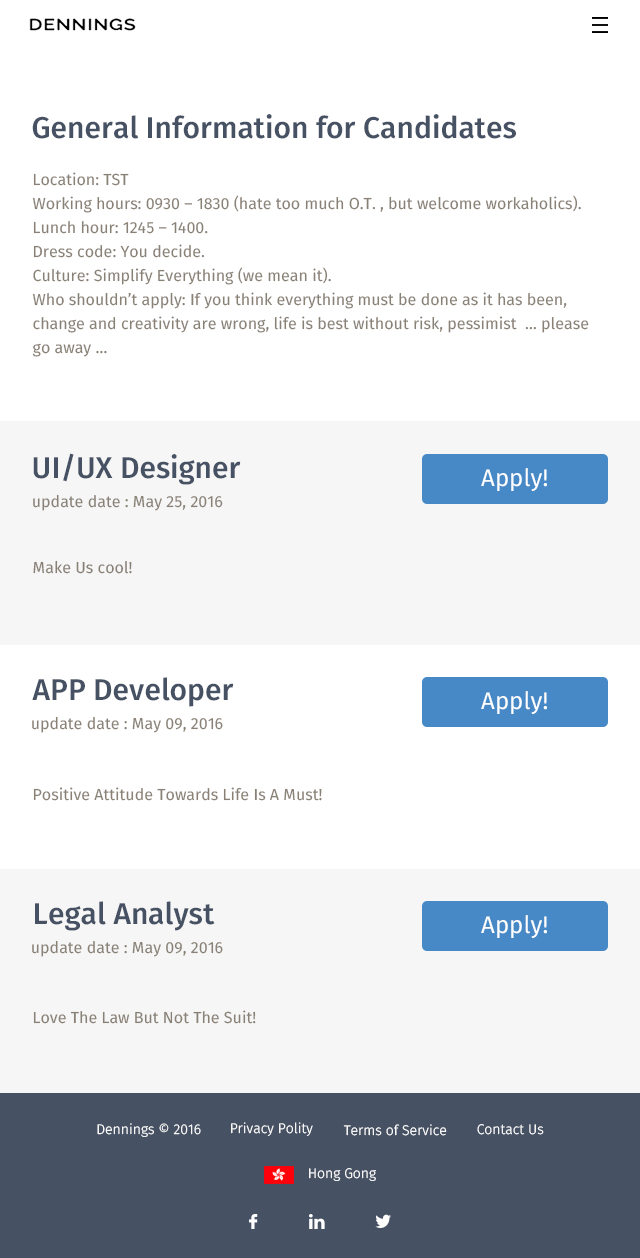
<style>
.page{position:relative;width:640px;height:1258px;background:#ffffff}
.page>*{position:absolute;margin:0}
.t1{font:30px "FiraSans-Medium";color:#465163}
.t2{font:16px/24px "FiraSans-Regular";color:#898176}
.t3{font:24px "FiraSans-Regular";color:#ffffff}
.t4{font:16px "FiraSans-Regular";color:#898176}
.t5{font:14px "FiraSans-Light";color:#ffffff}
</style>
<div class="page">
<p class="t1" style="left:32px;top:114px;width:484px;height:25px">General Information for Candidates</p>
<p class="t2" style="left:32px;top:172px;width:557px;height:185px">Location: TST<br>Working hours: 0930 – 1830 (hate too much O.T. , but welcome workaholics).<br>Lunch hour: 1245 – 1400.<br>Dress code: You decide.<br>Culture: Simplify Everything (we mean it).<br>Who shouldn’t apply: If you think everything must be done as it has been, change and creativity are wrong, life is best without risk, pessimist  … please go away …</p>
<p class="t1" style="left:33px;top:453px;width:208px;height:32px">UI/UX Designer</p>
<p class="t3" style="left:481px;top:468px;width:66px;height:23px">Apply!</p>
<p class="t4" style="left:33px;top:494px;width:190px;height:17px">update date : May 25, 2016</p>
<p class="t4" style="left:33px;top:560px;width:99px;height:14px">Make Us cool!</p>
<p class="t1" style="left:32px;top:677px;width:202px;height:30px">APP Developer</p>
<p class="t3" style="left:481px;top:691px;width:66px;height:23px">Apply!</p>
<p class="t4" style="left:32px;top:716px;width:191px;height:17px">update date : May 09, 2016</p>
<p class="t4" style="left:33px;top:787px;width:289px;height:14px">Positive Attitude Towards Life Is A Must!</p>
<p class="t1" style="left:35px;top:901px;width:180px;height:30px">Legal Analyst</p>
<p class="t3" style="left:481px;top:915px;width:66px;height:23px">Apply!</p>
<p class="t4" style="left:32px;top:940px;width:191px;height:17px">update date : May 09, 2016</p>
<p class="t4" style="left:33px;top:1010px;width:223px;height:14px">Love The Law But Not The Suit!</p>
<p class="t5" style="left:97px;top:1123px;width:104px;height:14px">Dennings © 2016</p>
<p class="t5" style="left:231px;top:1122px;width:82px;height:14px">Privacy Polity</p>
<p class="t5" style="left:343px;top:1124px;width:104px;height:12px">Terms of Service</p>
<p class="t5" style="left:477px;top:1124px;width:67px;height:11px">Contact Us</p>
<p class="t5" style="left:309px;top:1168px;width:67px;height:13px">Hong Gong</p>
</div>
